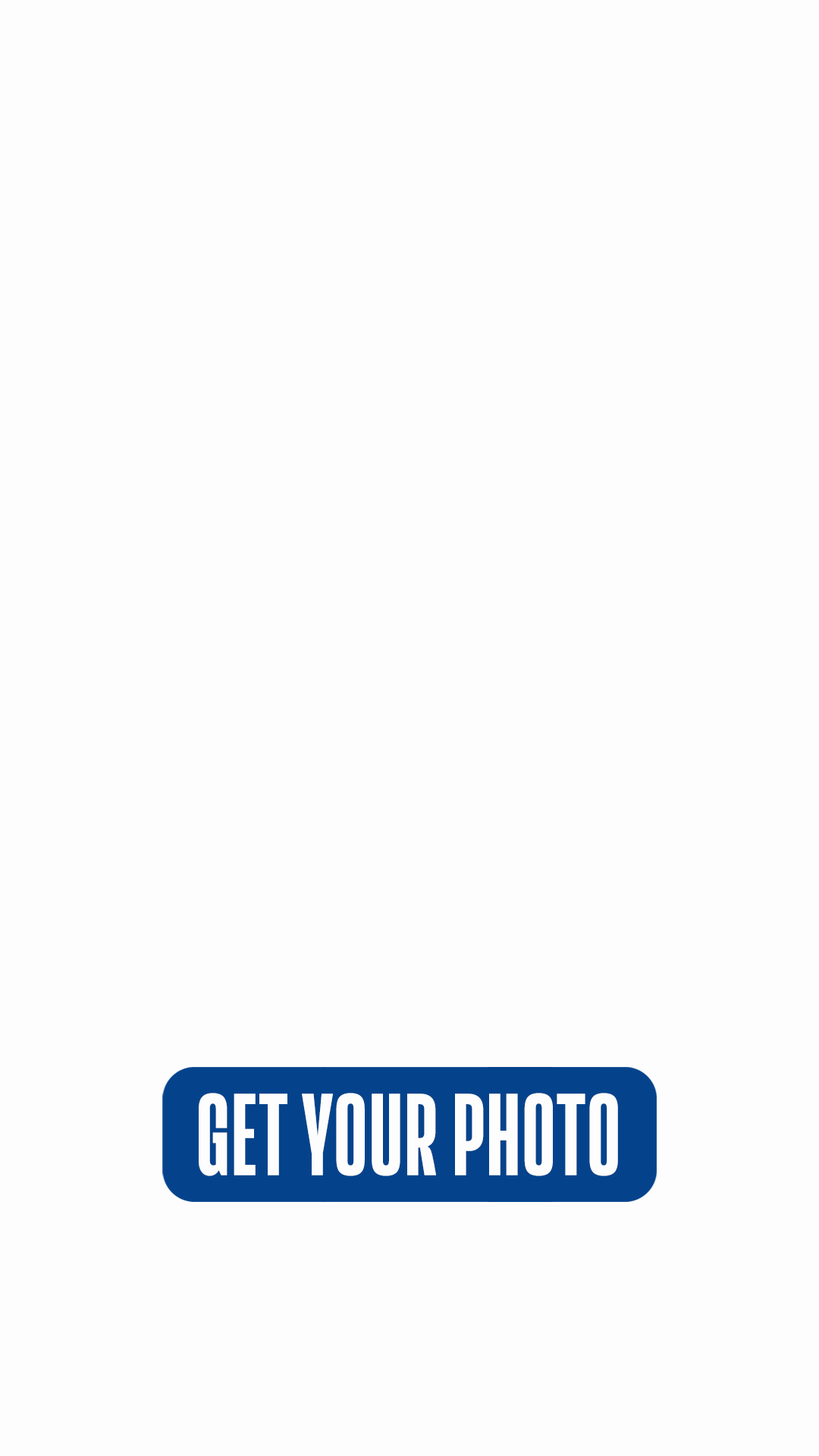
<style>
.page{position:relative;width:819px;height:1456px;background:#fefdfe}
.page>*{position:absolute;margin:0}
.t1{font:113.7px "ActionNBAApp-Bold";color:#fefdfd}
</style>
<div class="page">
<p class="t1" style="left:199px;top:1093px;width:419px;height:83px">GET YOUR PHOTO</p>
</div>
